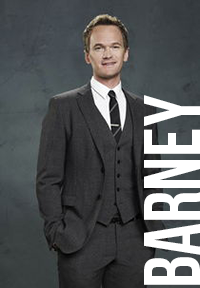
<style>
.page{position:relative;width:200px;height:288px}
.page>*{position:absolute;margin:0}
.t1{font:80px "BebasNeue";color:#ffffff}
</style>
<div class="page">
<p class="t1" style="left:144px;top:95px;width:56px;height:190px;rotate:-90deg">BARNEY</p>
</div>
